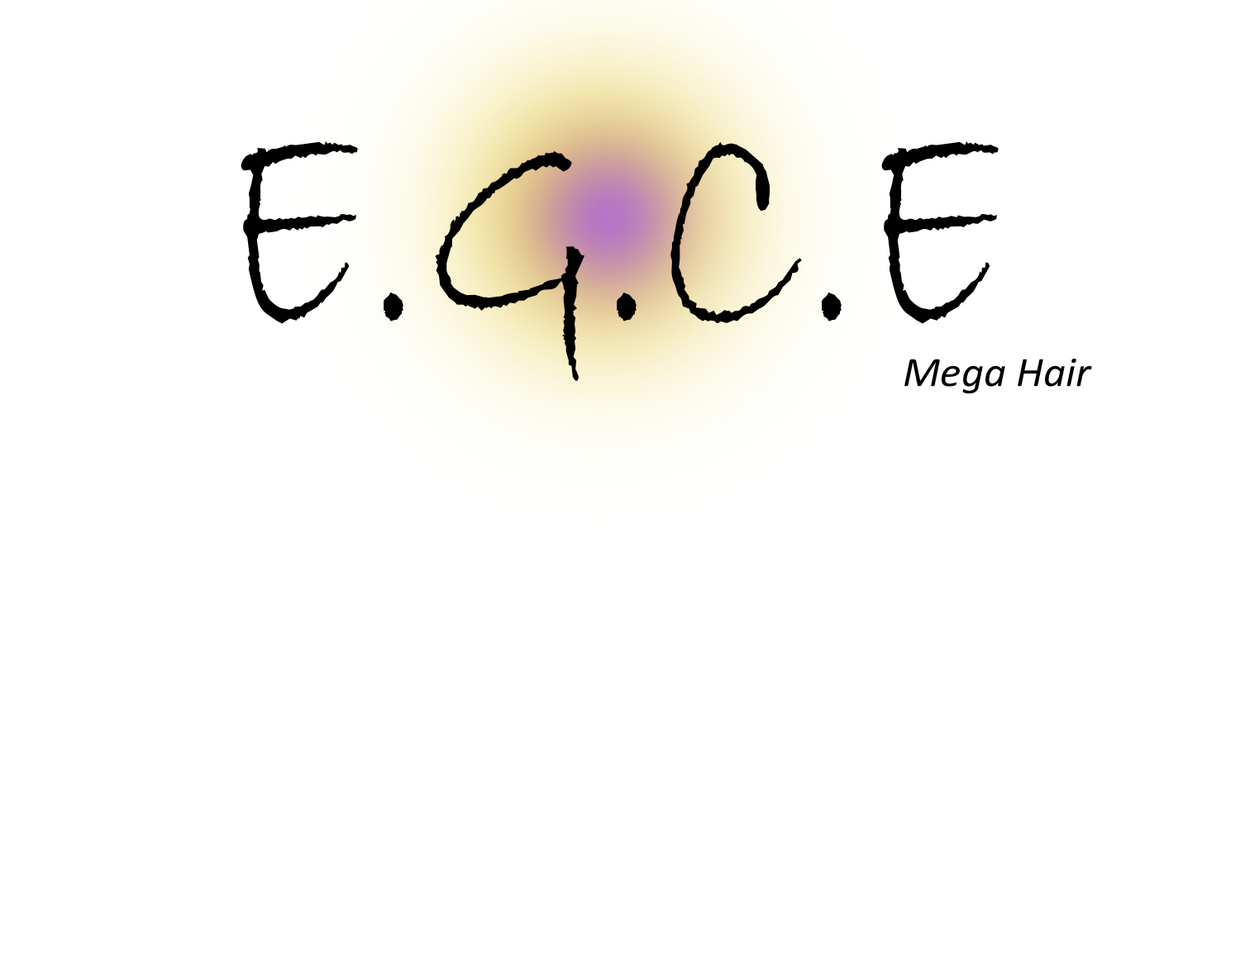
<style>
.page{position:relative;width:1240px;height:962px;background:#ffffff}
.page>*{position:absolute;margin:0}
.t1{font:329.3px "BradleyHandITC";color:#000000;scale:0.73 1}
.t2{font:42.2px "Calibri-Italic";color:#000000;scale:1.04 1}
</style>
<div class="page">
<p class="t1" style="left:240px;top:140px;width:758px;height:241px">E.G.C.E</p>
<p class="t2" style="left:904px;top:359px;width:188px;height:34px">Mega Hair</p>
</div>
